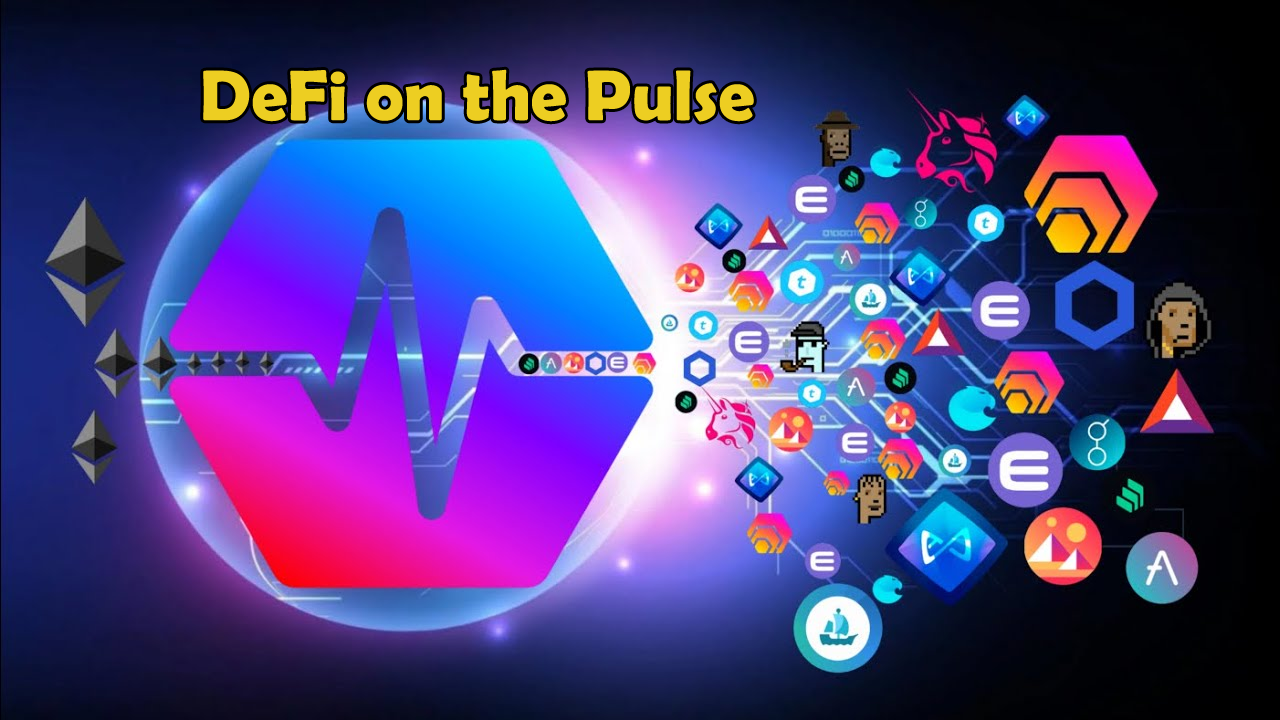
<style>
.page{position:relative;width:1280px;height:720px}
.page>*{position:absolute;margin:0}
.t1{font:72px "BerlinSansFBDemi-Bold";color:#edce22}
</style>
<div class="page">
<p class="t1" style="left:203px;top:69px;width:551px;height:53px">DeFi on the Pulse</p>
</div>
